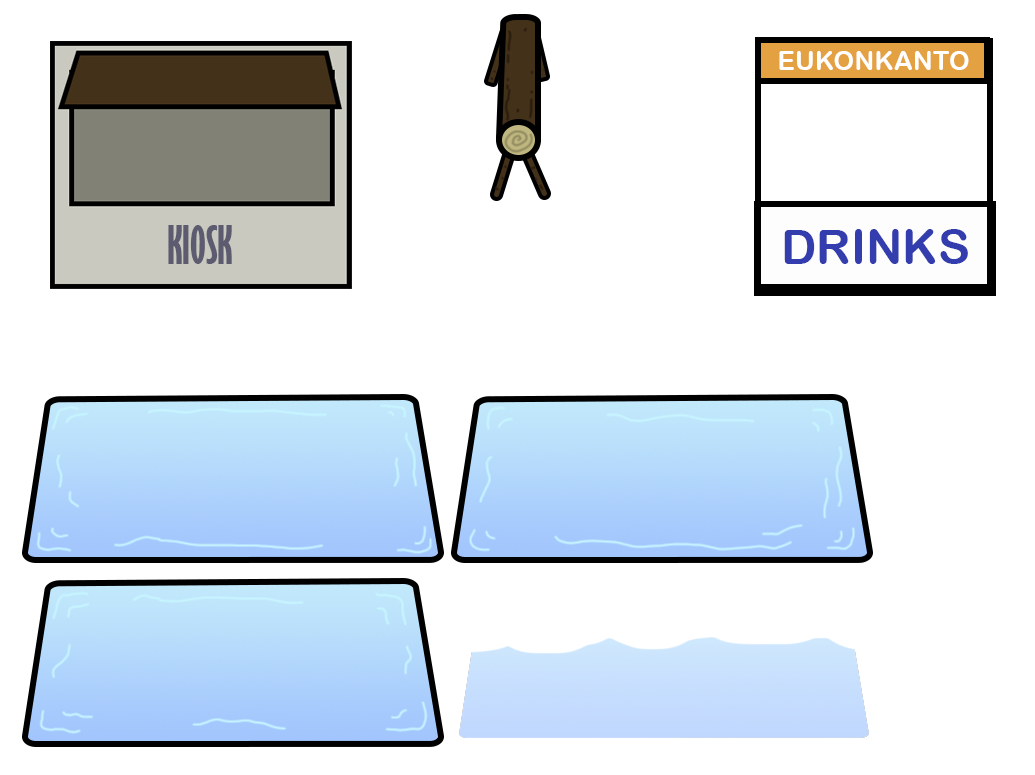
<style>
.page{position:relative;width:1035px;height:775px;background:#ffffff}
.page>*{position:absolute;margin:0}
.t1{font:26.3px "ArialRoundedMTBold";color:#ffffff}
.t2{font:48.7px "GillSansMT-ExtraCondensedBold";color:#5d5b6f}
.t3{font:48px "ArialRoundedMTBold";color:#343dad}
</style>
<div class="page">
<p class="t1" style="left:779px;top:51px;width:190px;height:19px">EUKONKANTO</p>
<p class="t2" style="left:168px;top:225px;width:64px;height:39px">KIOSK</p>
<p class="t3" style="left:784px;top:229px;width:184px;height:35px">DRINKS</p>
</div>
